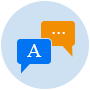
<style>
.page{position:relative;width:90px;height:90px;background:#cee1f2}
.page>*{position:absolute;margin:0}
.t1{font:20px "TimesNewRomanPSMT";color:#ffffff}
</style>
<div class="page">
<p class="t1" style="left:52px;top:32px;width:13px;height:2px">...</p>
<p class="t1" style="left:27px;top:44px;width:15px;height:13px">A</p>
</div>
